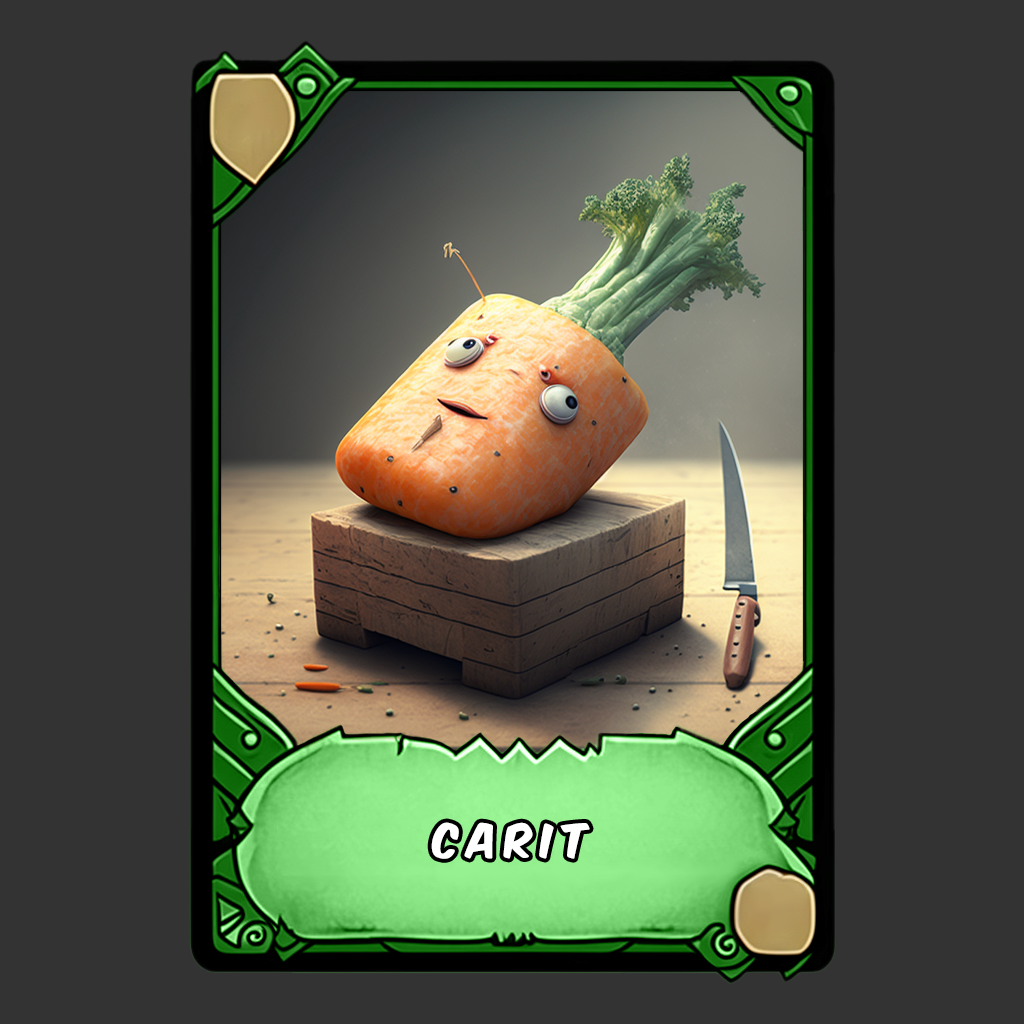
<style>
.page{position:relative;width:1024px;height:1024px;background:#333333}
.page>*{position:absolute;margin:0}
.t1{font:40px "KomikaAxis";letter-spacing:0.2em;color:#ffffff}
</style>
<div class="page">
<p class="t1" style="left:431px;top:822px;width:159px;height:37px">carit</p>
</div>
